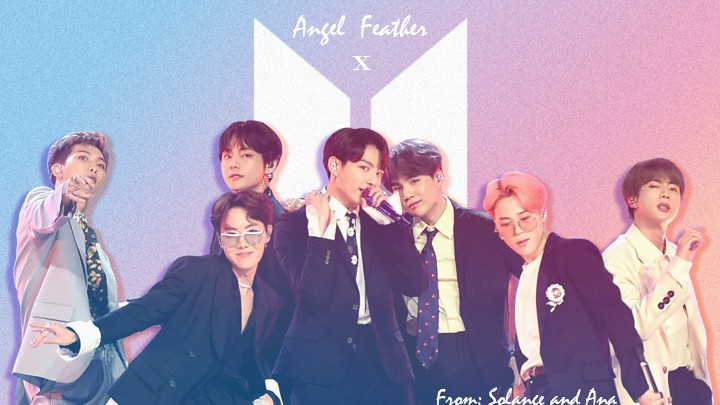
<style>
.page{position:relative;width:720px;height:405px}
.page>*{position:absolute;margin:0}
.t1{font:30px "Mistral";color:#ffffff}
.t2{font:36px "BodoniMT";color:#ffffff}
</style>
<div class="page">
<p class="t1" style="left:292px;top:15px;width:136px;height:30px">Angel  Feather</p>
<p class="t2" style="left:352px;top:56px;width:19px;height:14px">x</p>
</div>
